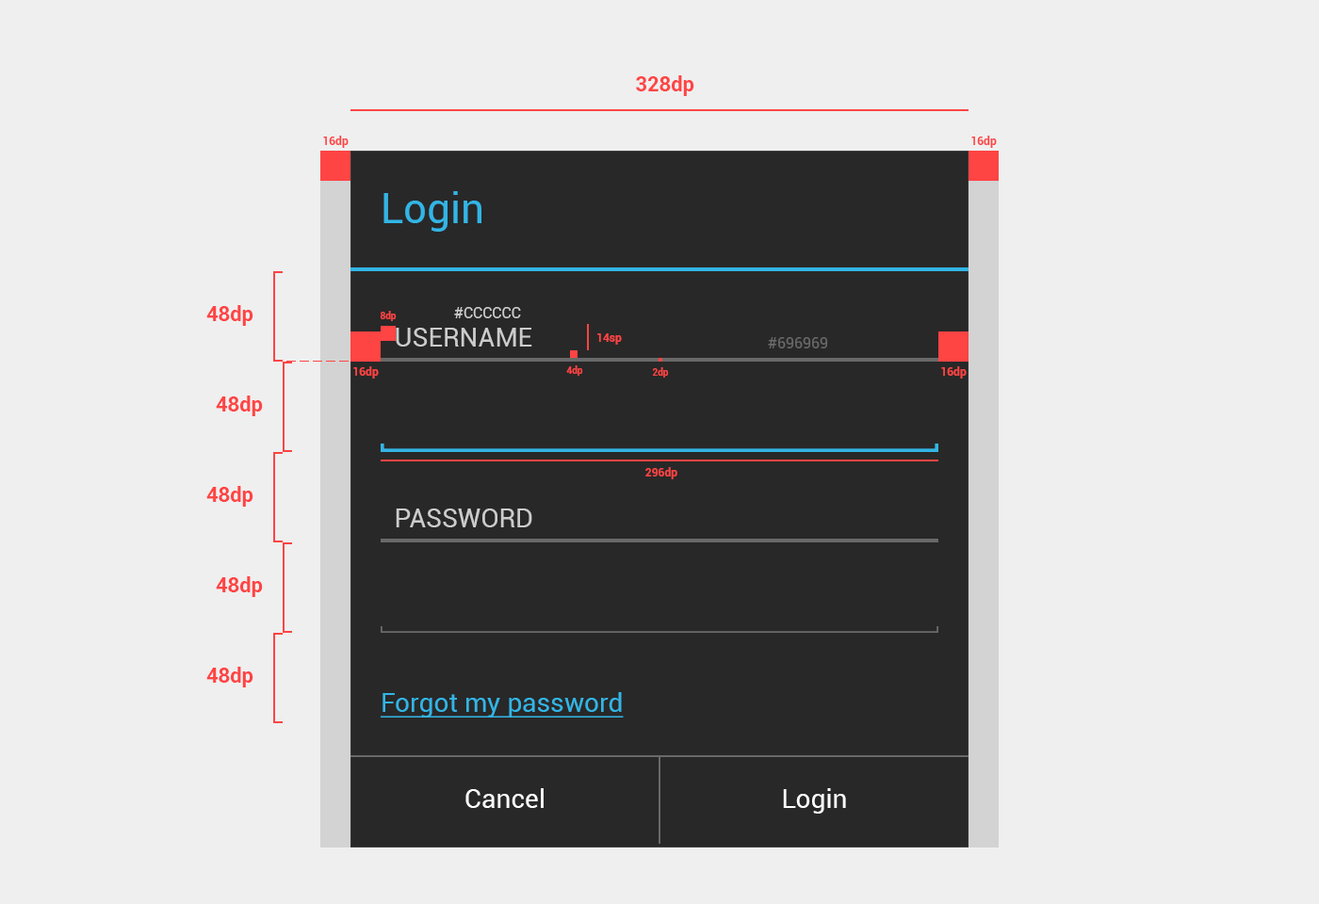
<style>
.page{position:relative;width:1319px;height:904px;background:#efefef}
.page>*{position:absolute;margin:0}
.t1{font:20.7px "Roboto-Bold";color:#ff4444}
.t2{font:11.3px "Roboto-Bold";color:#ff4444}
.t3{font:41.8px "Roboto-Regular";color:#33b5e5}
.t4{font:9.4px "Roboto-Bold";color:#ff4444}
.t5{font:15.1px "Roboto-Regular";color:#cccccc}
.t6{font:26.7px "Roboto-Regular";color:#cccccc}
.t7{font:15.1px "Roboto-Regular";color:#696969}
.t8{font:26.7px "Roboto-Regular";color:#33b5e5;text-decoration:underline}
.t9{font:26.8px "Roboto-Regular";color:#ffffff}
</style>
<div class="page">
<p class="t1" style="left:636px;top:75px;width:58px;height:21px">328dp</p>
<p class="t2" style="left:323px;top:136px;width:26px;height:12px">16dp</p>
<p class="t2" style="left:971px;top:136px;width:26px;height:12px">16dp</p>
<p class="t3" style="left:383px;top:191px;width:98px;height:41px">Login</p>
<p class="t1" style="left:206px;top:305px;width:47px;height:21px">48dp</p>
<p class="t4" style="left:380px;top:311px;width:17px;height:10px">8dp</p>
<p class="t5" style="left:454px;top:307px;width:67px;height:11px">#CCCCCC</p>
<p class="t6" style="left:396px;top:328px;width:136px;height:19px">USERNAME</p>
<p class="t2" style="left:597px;top:333px;width:25px;height:12px">14sp</p>
<p class="t7" style="left:768px;top:337px;width:60px;height:12px">#696969</p>
<p class="t4" style="left:566px;top:365px;width:17px;height:11px">4dp</p>
<p class="t2" style="left:353px;top:366px;width:26px;height:13px">16dp</p>
<p class="t4" style="left:653px;top:367px;width:16px;height:11px">2dp</p>
<p class="t2" style="left:941px;top:366px;width:25px;height:13px">16dp</p>
<p class="t1" style="left:216px;top:396px;width:47px;height:20px">48dp</p>
<p class="t2" style="left:645px;top:467px;width:32px;height:12px">296dp</p>
<p class="t1" style="left:206px;top:486px;width:47px;height:21px">48dp</p>
<p class="t6" style="left:396px;top:509px;width:136px;height:18px">PASSWORD</p>
<p class="t1" style="left:216px;top:576px;width:47px;height:21px">48dp</p>
<p class="t1" style="left:206px;top:667px;width:47px;height:21px">48dp</p>
<p class="t8" style="left:380px;top:692px;width:244px;height:26px">Forgot my password</p>
<p class="t9" style="left:465px;top:788px;width:78px;height:20px">Cancel</p>
<p class="t9" style="left:783px;top:788px;width:63px;height:26px">Login</p>
</div>
